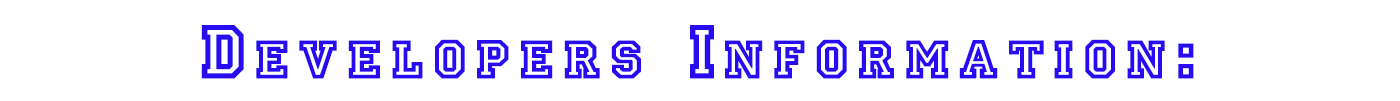
<style>
.page{position:relative;width:1400px;height:101px;background:#ffffff}
.page>*{position:absolute;margin:0}
.t1{font:80px "Letterman";letter-spacing:0.075em;color:#270cf2;font-weight:bold}
</style>
<div class="page">
<p class="t1" style="left:201px;top:25px;width:993px;height:54px">Developers Information:</p>
</div>
